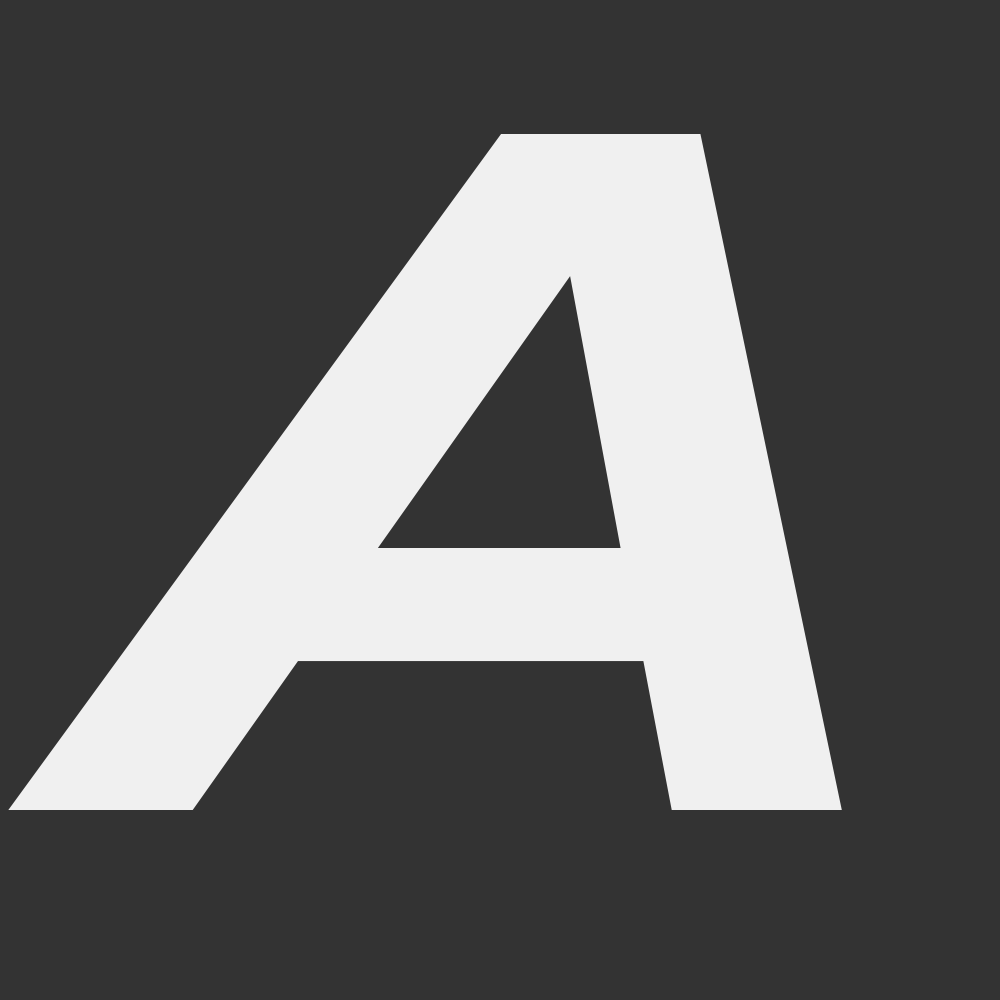
<style>
.page{position:relative;width:1000px;height:1000px;background:#333333}
.page>*{position:absolute;margin:0}
.t1{font:943.9px "Arial-BoldItalicMT";letter-spacing:0.1em;color:#f0f0f0;scale:1.29 1}
</style>
<div class="page">
<p class="t1" style="left:8px;top:134px;width:834px;height:676px">A</p>
</div>
